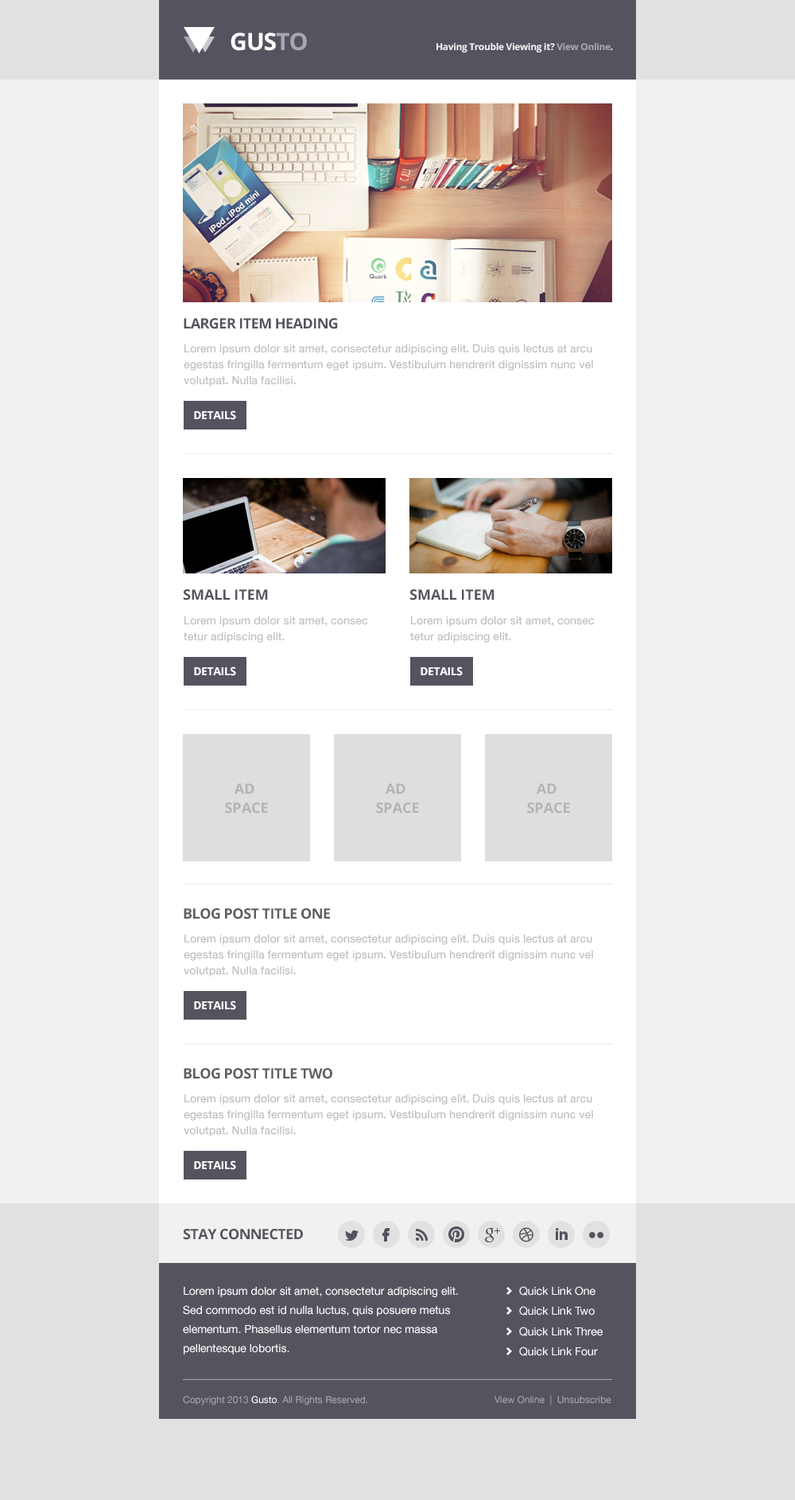
<style>
.page{position:relative;width:795px;height:1500px;background:#f1f1f1}
.page>*{position:absolute;margin:0}
.t1{font:23.9px "OpenSans-Bold";letter-spacing:-0.03em;color:#ffffff;text-transform:uppercase}
.t2{font:23.9px "OpenSans-Bold";letter-spacing:-0.03em;color:#a6a7b0;text-transform:uppercase}
.t3{font:9.5px "OpenSans-Bold";letter-spacing:-0.03em;color:#f1f1f1}
.t4{font:9.5px "OpenSans-Bold";letter-spacing:-0.03em;color:#a6a7b0}
.t5{font:14.3px "OpenSans-Bold";letter-spacing:-0.03em;color:#53545e;text-transform:uppercase}
.t6{font:11.1px/15.9px "HelveticaNeue-Medium";color:#bfc0c3}
.t7{font:11.1px "OpenSans-Bold";letter-spacing:-0.03em;color:#ffffff;text-transform:uppercase}
.t8{font:14.3px "OpenSans-Bold";color:#53545e;text-transform:uppercase}
.t9{font:14.3px/19.1px "OpenSans-Bold";color:#b4b4b4}
.t10{font:14.3px "OpenSans-Bold";letter-spacing:-0.03em;color:#5e5e63;text-transform:uppercase}
.t11{font:11.1px/19.1px "HelveticaNeue";color:#ffffff}
.t12{font:11.1px "HelveticaNeue";color:#ffffff}
.t13{font:9.5px "HelveticaNeue";color:#a6a7b0}
.t14{font:9.5px "HelveticaNeue";color:#ffffff}
</style>
<div class="page">
<p class="t1" style="left:231px;top:33px;width:76px;height:18px">Gus<span class="t2">to</span></p>
<p class="t3" style="left:437px;top:43px;width:176px;height:9px">Having Trouble Viewing it? <span class="t4">View Online</span>.</p>
<p class="t5" style="left:184px;top:318px;width:154px;height:11px">Larger Item Heading</p>
<p class="t6" style="left:184px;top:344px;width:409px;height:42px">Lorem ipsum dolor sit amet, consectetur adipiscing elit. Duis quis lectus at arcu egestas fringilla fermentum eget ipsum. Vestibulum hendrerit dignissim nunc vel volutpat. Nulla facilisi.</p>
<p class="t7" style="left:194px;top:410px;width:42px;height:10px">Details</p>
<p class="t8" style="left:183px;top:589px;width:85px;height:11px">Small Item</p>
<p class="t8" style="left:409px;top:589px;width:86px;height:11px">Small Item</p>
<p class="t6" style="left:184px;top:616px;width:184px;height:26px">Lorem ipsum dolor sit amet, consec tetur adipiscing elit.</p>
<p class="t6" style="left:410px;top:616px;width:185px;height:26px">Lorem ipsum dolor sit amet, consec tetur adipiscing elit.</p>
<p class="t7" style="left:194px;top:666px;width:42px;height:10px">Details</p>
<p class="t7" style="left:421px;top:666px;width:42px;height:10px">Details</p>
<p class="t9" style="left:225px;top:783px;width:43px;height:30px;text-align:center">AD <br>SPACE</p>
<p class="t9" style="left:376px;top:783px;width:43px;height:30px;text-align:center">AD <br>SPACE</p>
<p class="t9" style="left:527px;top:783px;width:43px;height:30px;text-align:center">AD <br>SPACE</p>
<p class="t10" style="left:184px;top:908px;width:146px;height:11px">Blog Post Title One</p>
<p class="t6" style="left:184px;top:934px;width:409px;height:42px">Lorem ipsum dolor sit amet, consectetur adipiscing elit. Duis quis lectus at arcu egestas fringilla fermentum eget ipsum. Vestibulum hendrerit dignissim nunc vel volutpat. Nulla facilisi.</p>
<p class="t7" style="left:194px;top:1000px;width:42px;height:10px">Details</p>
<p class="t10" style="left:184px;top:1068px;width:148px;height:11px">Blog Post Title Two</p>
<p class="t6" style="left:184px;top:1094px;width:409px;height:42px">Lorem ipsum dolor sit amet, consectetur adipiscing elit. Duis quis lectus at arcu egestas fringilla fermentum eget ipsum. Vestibulum hendrerit dignissim nunc vel volutpat. Nulla facilisi.</p>
<p class="t7" style="left:194px;top:1160px;width:42px;height:10px">Details</p>
<p class="t5" style="left:183px;top:1228px;width:120px;height:12px">Stay Connected</p>
<p class="t11" style="left:183px;top:1287px;width:275px;height:67px">Lorem ipsum dolor sit amet, consectetur adipiscing elit. Sed commodo est id nulla luctus, quis posuere metus elementum. Phasellus elementum tortor nec massa pellentesque lobortis.</p>
<p class="t12" style="left:519px;top:1286px;width:77px;height:9px">Quick Link One</p>
<p class="t12" style="left:519px;top:1306px;width:76px;height:9px">Quick Link Two</p>
<p class="t12" style="left:519px;top:1326px;width:84px;height:10px">Quick Link Three</p>
<p class="t12" style="left:519px;top:1346px;width:79px;height:10px">Quick Link Four</p>
<p class="t13" style="left:183px;top:1395px;width:184px;height:10px">Copyright 2013 <span class="t14">Gusto</span>. All Rights Reserved.</p>
<p class="t13" style="left:495px;top:1395px;width:116px;height:10px">View Online  |  Unsubscribe</p>
</div>
